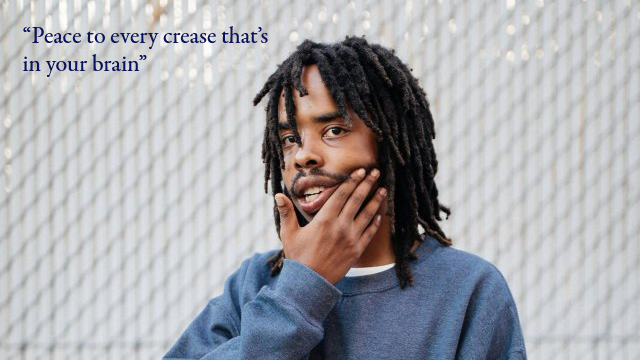
<style>
.page{position:relative;width:640px;height:360px}
.page>*{position:absolute;margin:0}
.t1{font:24px/28px "GaramondPremrPro";color:#0a1362}
</style>
<div class="page">
<p class="t1" style="left:22px;top:26px;width:246px;height:51px">“Peace to every crease that’s in your brain”</p>
</div>
